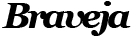
<style>
.page{position:relative;width:135px;height:37px;background:#ffffff}
.page>*{position:absolute;margin:0}
.t1{font:36px "Georgia-BoldItalic";letter-spacing:-0.1em;color:#000000}
</style>
<div class="page">
<p class="t1" style="left:2px;top:1px;width:129px;height:35px">Braveja</p>
</div>
